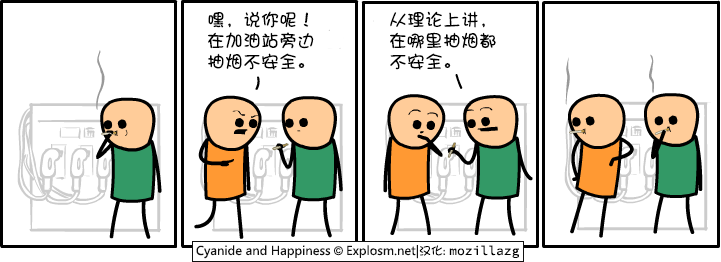
<style>
.page{position:relative;width:721px;height:262px;background:#ffffff}
.page>*{position:absolute;margin:0}
.t1{font:18px/21px "DFPShaoNvW5";color:#000000}
</style>
<div class="page">
<p class="t1" style="left:208px;top:11px;width:106px;height:59px">嘿，说你呢！<br>在加油站旁边<br>抽烟不安全。</p>
<p class="t1" style="left:390px;top:11px;width:106px;height:59px">从理论上讲，<br>在哪里抽烟都<br>不安全。</p>
</div>
